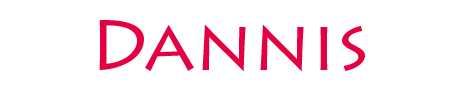
<style>
.page{position:relative;width:460px;height:100px;background:#ffffff}
.page>*{position:absolute;margin:0}
.t1{font:72px "LithosPro-Regular";color:#e50041}
</style>
<div class="page">
<p class="t1" style="left:99px;top:20px;width:266px;height:51px">Dannis</p>
</div>
